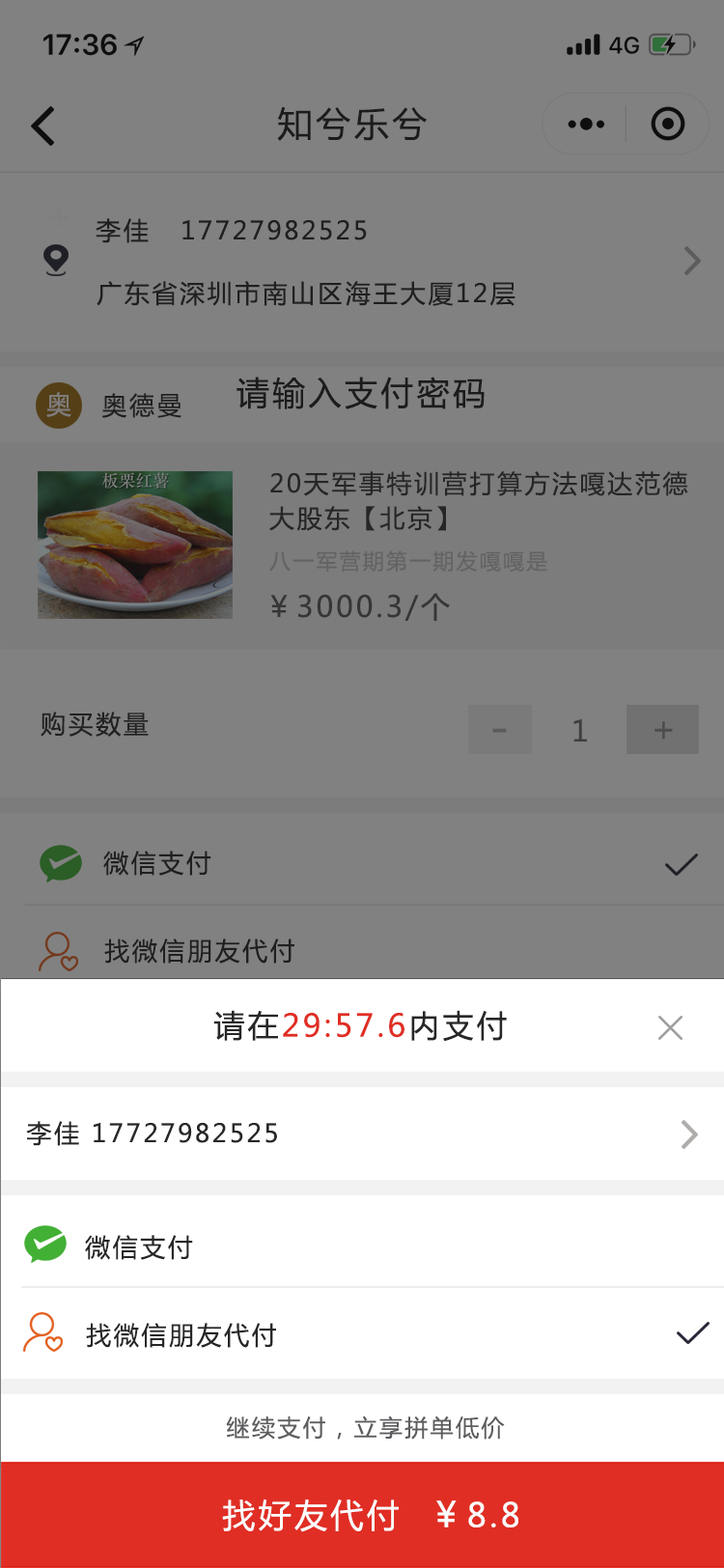
<style>
.page{position:relative;width:724px;height:1568px;background:#818181}
.page>*{position:absolute;margin:0}
.t1{font:34.8px "MicrosoftYaHei";letter-spacing:0.1em;color:#201f20}
.t2{font:25.1px "MicrosoftYaHei";letter-spacing:0.1em;color:#282727}
.t3{font:32.8px "MicrosoftYaHei";letter-spacing:0.1em;color:#1d1c1c}
.t4{font:25.1px "MicrosoftYaHei";letter-spacing:0.1em;color:#7e7d7b}
.t5{font:25.1px/34.8px "MicrosoftYaHei";letter-spacing:0.1em;color:#373636}
.t6{font:21.2px "MicrosoftYaHei";letter-spacing:0.1em;color:#646363}
.t7{font:29px "MicrosoftYaHei";letter-spacing:0.1em;color:#363636}
.t8{font:25.1px "MicrosoftYaHei";letter-spacing:0.1em;color:#2f2e2e}
.t9{font:29px "MicrosoftYaHei";letter-spacing:0.1em;color:#403f3f}
.t10{font:34.8px "MicrosoftYaHei";letter-spacing:0.1em;color:#4e4d4d}
.t11{font:46.3px "MicrosoftYaHei";letter-spacing:0.1em;color:#5b5b5b}
.t12{font:30.9px "MicrosoftYaHei";letter-spacing:0.1em;color:#e02e24}
.t13{font:30.9px "MicrosoftYaHei";letter-spacing:0.1em;color:#282727}
.t14{font:23.2px "MicrosoftYaHei";letter-spacing:0.1em;color:#5c5d5f}
.t15{font:32.8px "MicrosoftYaHei";letter-spacing:0.1em;color:#fcfdfd}
.t16{font:34.8px "MicrosoftYaHei";letter-spacing:0.1em;color:#fcfdfd}
</style>
<div class="page">
<p class="t1" style="left:277px;top:106px;width:150px;height:35px">知兮乐兮</p>
<p class="t2" style="left:96px;top:218px;width:271px;height:25px">李佳   17727982525</p>
<p class="t2" style="left:97px;top:281px;width:419px;height:25px">广东省深圳市南山区海王大厦12层</p>
<p class="t3" style="left:237px;top:377px;width:248px;height:32px">请输入支付密码</p>
<p class="t4" style="left:46px;top:392px;width:25px;height:25px">奥</p>
<p class="t2" style="left:101px;top:393px;width:81px;height:25px">奥德曼</p>
<p class="t5" style="left:269px;top:471px;width:419px;height:60px">20天军事特训营打算方法嘎达范德<br>大股东【北京】</p>
<p class="t6" style="left:269px;top:550px;width:279px;height:23px">八一军营期第一期发嘎嘎是</p>
<p class="t7" style="left:270px;top:593px;width:180px;height:28px">￥3000.3/个</p>
<p class="t8" style="left:41px;top:712px;width:108px;height:25px">购买数量</p>
<p class="t9" style="left:574px;top:718px;width:13px;height:24px">1</p>
<p class="t10" style="left:655px;top:721px;width:18px;height:19px">+</p>
<p class="t11" style="left:492px;top:728px;width:15px;height:5px">-</p>
<p class="t2" style="left:103px;top:851px;width:108px;height:25px">微信支付</p>
<p class="t2" style="left:104px;top:938px;width:190px;height:26px">找微信朋友代付</p>
<p class="t12" style="left:213px;top:1010px;width:294px;height:32px"><span class="t13">请在</span>29:57.6<span class="t13">内支付</span></p>
<p class="t2" style="left:26px;top:1121px;width:251px;height:25px">李佳 17727982525</p>
<p class="t2" style="left:85px;top:1235px;width:108px;height:25px">微信支付</p>
<p class="t2" style="left:86px;top:1323px;width:190px;height:25px">找微信朋友代付</p>
<p class="t14" style="left:226px;top:1415px;width:279px;height:25px">继续支付，立享拼单低价</p>
<p class="t15" style="left:222px;top:1499px;width:296px;height:33px">找好友代付  <span class="t16">￥</span>8.8</p>
</div>
